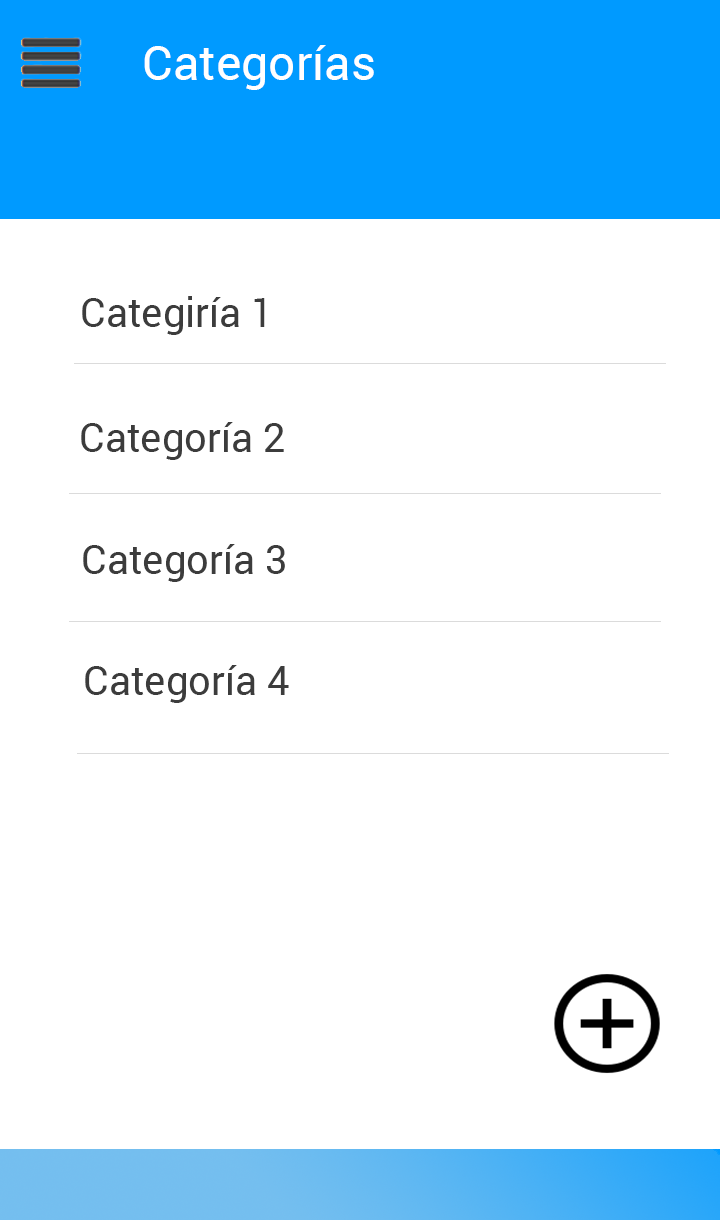
<style>
.page{position:relative;width:720px;height:1220px;background:#ffffff}
.page>*{position:absolute;margin:0}
.t1{font:48px "Roboto-Regular";color:#ffffff}
.t2{font:40px "Roboto-Regular";color:#3c3c3c}
</style>
<div class="page">
<p class="t1" style="left:144px;top:45px;width:230px;height:45px">Categorías</p>
<p class="t2" style="left:82px;top:296px;width:183px;height:39px">Categiría 1</p>
<p class="t2" style="left:81px;top:422px;width:203px;height:38px">Categoría 2</p>
<p class="t2" style="left:83px;top:544px;width:202px;height:38px">Categoría 3</p>
<p class="t2" style="left:85px;top:665px;width:204px;height:38px">Categoría 4</p>
</div>
